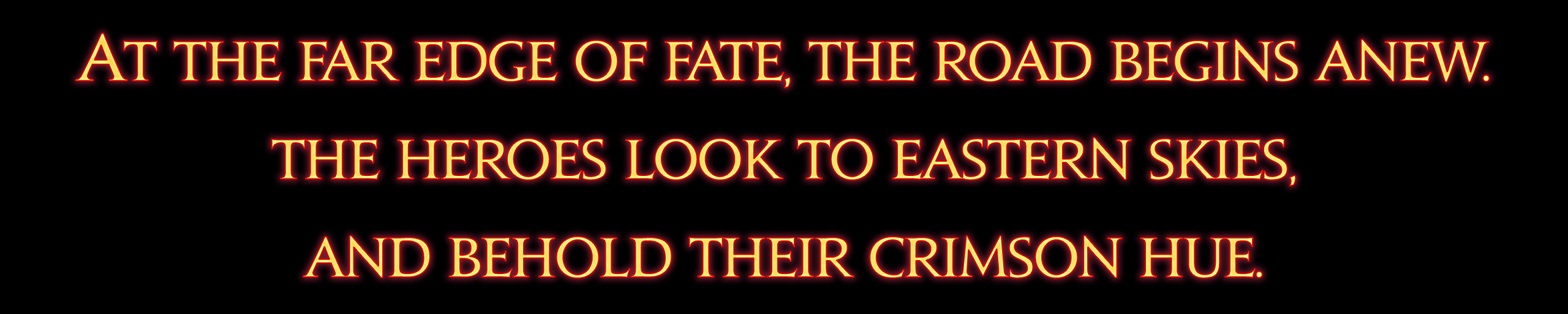
<style>
.page{position:relative;width:1568px;height:314px;background:#000000}
.page>*{position:absolute;margin:0}
.t1{font:50.6px/98px "ACTIONLEARNED!-Bold";letter-spacing:-0.05em}
.t2{font:59.6px/98px "ACTIONLEARNED!-Bold";letter-spacing:-0.05em}
</style>
<div class="page">
<p class="t1" style="left:75px;top:33px;width:1415px;height:245px;text-align:center"><span class="t2">A</span>t the far edge of fate, the road begins anew.<br>The heroes look to eastern skies,<br>and behold their crimson hue.</p>
</div>
